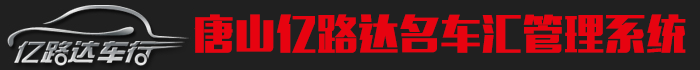
<style>
.page{position:relative;width:700px;height:70px;background:#202020}
.page>*{position:absolute;margin:0}
.t1{font:40px "MFLiHei_Noncommercial-Regular";color:#e70310;font-weight:bold}
</style>
<div class="page">
<p class="t1" style="left:195px;top:14px;width:491px;height:39px">唐山亿路达名车汇管理系统</p>
</div>
